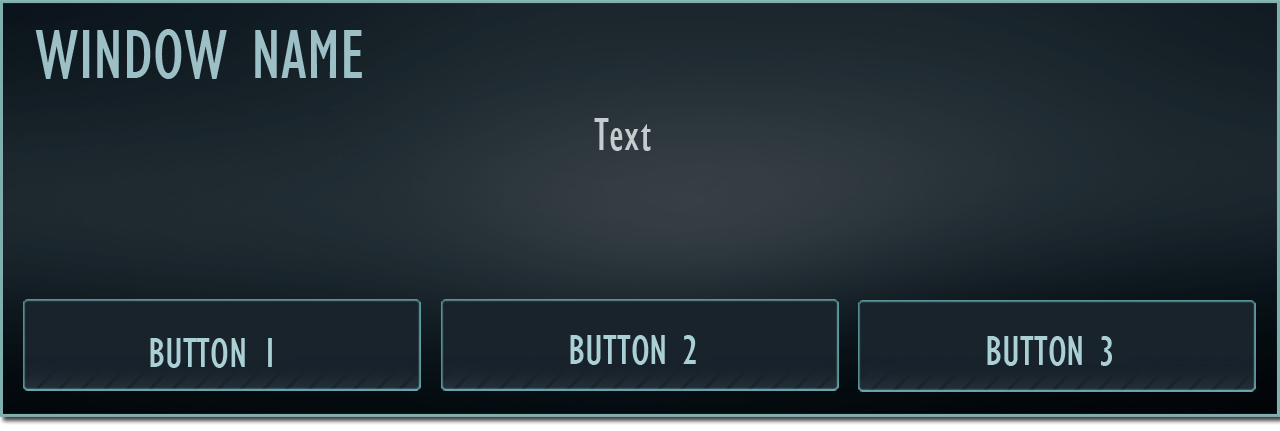
<style>
.page{position:relative;width:1280px;height:431px}
.page>*{position:absolute;margin:0}
.t1{font:72px "GillSansMT-Condensed";color:#9cc0c6}
.t2{font:48px "GillSansMT-Condensed";color:#c6cccd}
.t3{font:44px "GillSansMT-Condensed";color:#aacfd4}
</style>
<div class="page">
<p class="t1" style="left:35px;top:29px;width:327px;height:50px">WINDOW NAME</p>
<p class="t2" style="left:594px;top:118px;width:57px;height:33px">Text</p>
<p class="t3" style="left:150px;top:338px;width:122px;height:30px">BUTTON 1</p>
<p class="t3" style="left:570px;top:335px;width:126px;height:30px">BUTTON 2</p>
<p class="t3" style="left:987px;top:336px;width:125px;height:30px">BUTTON 3</p>
</div>
